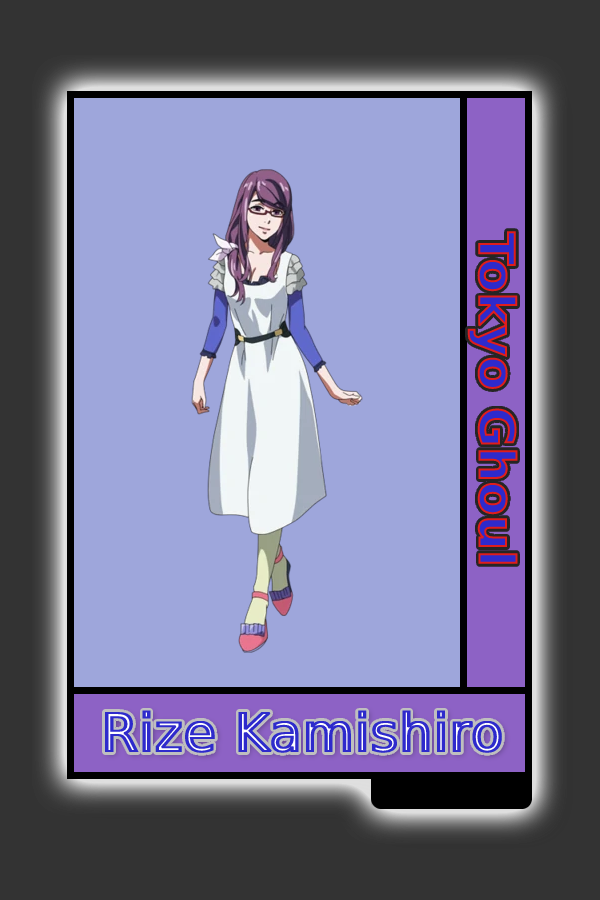
<style>
.page{position:relative;width:600px;height:900px;background:#9ea6db}
.page>*{position:absolute;margin:0}
.t1{font:48.8px "MADETOMMY-Bold"}
.t2{font:52px "CoolveticaRg-Regular";font-weight:bold}
</style>
<div class="page">
<p class="t1" style="left:467px;top:231px;width:51px;height:333px;rotate:90deg">Tokyo Ghoul</p>
<p class="t2" style="left:105px;top:710px;width:397px;height:43px">Rize Kamishiro</p>
</div>
